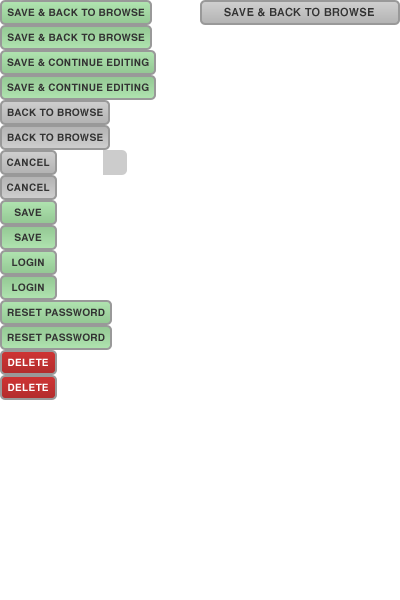
<style>
.page{position:relative;width:400px;height:600px;background:#ffffff}
.page>*{position:absolute;margin:0}
.t1{font:10px "Helvetica-Bold";letter-spacing:0.025em;color:#333333}
.t2{font:11px "Helvetica-Bold";letter-spacing:0.025em;color:#333333}
.t3{font:10px "Helvetica-Bold";letter-spacing:0.025em;color:#ffffff}
</style>
<div class="page">
<p class="t1" style="left:7px;top:8px;width:138px;height:8px">SAVE &amp; BACK TO BROWSE</p>
<p class="t2" style="left:224px;top:7px;width:150px;height:10px">SAVE &amp; BACK TO BROWSE</p>
<p class="t1" style="left:7px;top:33px;width:138px;height:8px">SAVE &amp; BACK TO BROWSE</p>
<p class="t1" style="left:7px;top:58px;width:142px;height:8px">SAVE &amp; CONTINUE EDITING</p>
<p class="t1" style="left:7px;top:83px;width:142px;height:8px">SAVE &amp; CONTINUE EDITING</p>
<p class="t1" style="left:7px;top:108px;width:96px;height:8px">BACK TO BROWSE</p>
<p class="t1" style="left:7px;top:133px;width:96px;height:8px">BACK TO BROWSE</p>
<p class="t1" style="left:7px;top:158px;width:43px;height:8px">CANCEL</p>
<p class="t1" style="left:7px;top:183px;width:43px;height:8px">CANCEL</p>
<p class="t1" style="left:14px;top:208px;width:28px;height:8px">SAVE</p>
<p class="t1" style="left:14px;top:233px;width:28px;height:8px">SAVE</p>
<p class="t1" style="left:12px;top:258px;width:32px;height:8px">LOGIN</p>
<p class="t1" style="left:12px;top:283px;width:32px;height:8px">LOGIN</p>
<p class="t1" style="left:7px;top:308px;width:98px;height:8px">RESET PASSWORD</p>
<p class="t1" style="left:7px;top:333px;width:98px;height:8px">RESET PASSWORD</p>
<p class="t3" style="left:8px;top:358px;width:40px;height:8px">DELETE</p>
<p class="t3" style="left:8px;top:383px;width:40px;height:8px">DELETE</p>
</div>
